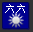
<style>
.page{position:relative;width:33px;height:32px;background:#000090}
.page>*{position:absolute;margin:0}
.t1{font:10.4px "SimSun";color:#ffffff}
</style>
<div class="page">
<p class="t1" style="left:5px;top:4px;width:20px;height:9px">六六</p>
</div>
